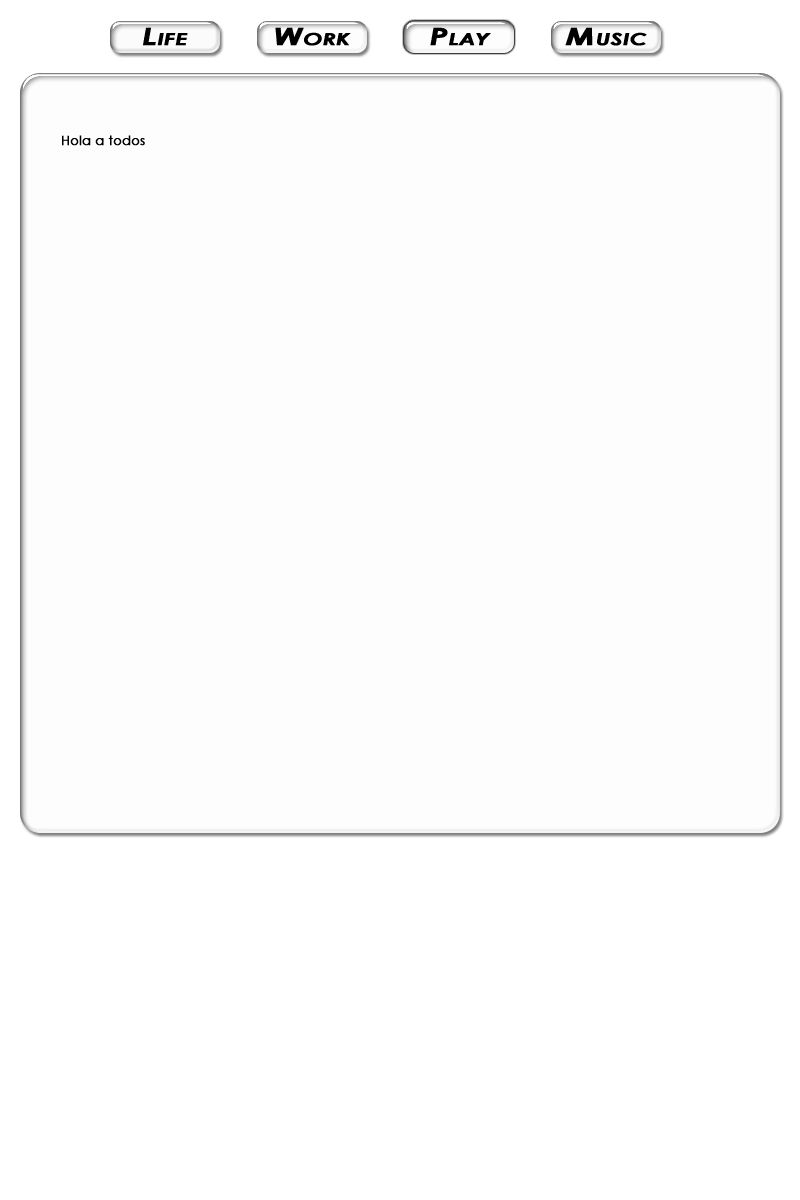
<style>
.page{position:relative;width:800px;height:1200px;background:#fdfdfd}
.page>*{position:absolute;margin:0}
.t1{font:24px "CenturyGothic-BoldItalic";color:#000000;font-variant:small-caps;font-weight:bold;scale:1.33 1}
.t2{font:13px "CenturyGothic";color:#000000;font-weight:bold}
</style>
<div class="page">
<p class="t1" style="left:143px;top:27px;width:45px;height:19px">Life</p>
<p class="t1" style="left:275px;top:27px;width:76px;height:19px">Work</p>
<p class="t1" style="left:430px;top:27px;width:61px;height:19px">Play</p>
<p class="t1" style="left:565px;top:27px;width:82px;height:19px">Music</p>
<p class="t2" style="left:62px;top:135px;width:83px;height:11px">Hola a todos</p>
</div>
